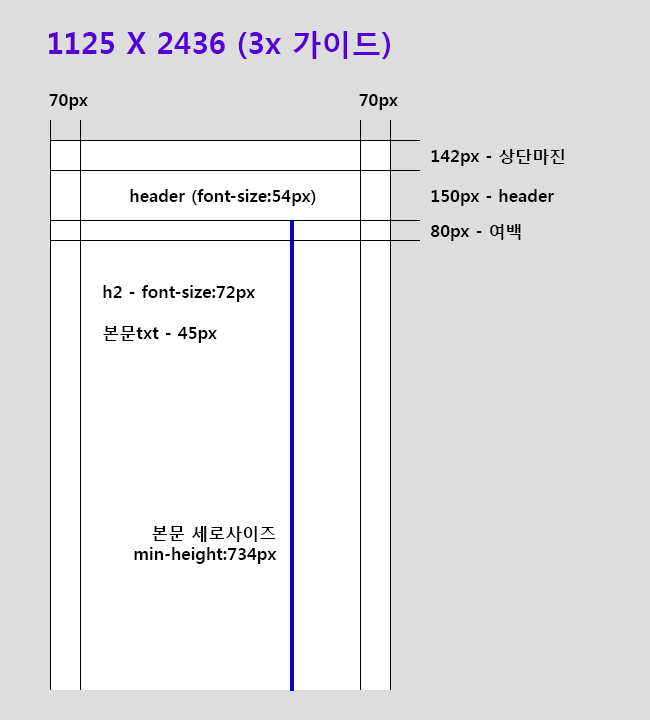
<style>
.page{position:relative;width:650px;height:720px;background:#dddddd}
.page>*{position:absolute;margin:0}
.t1{font:30px "MalgunGothicBold";color:#5500d5}
.t2{font:17px "MalgunGothicBold";color:#000000}
</style>
<div class="page">
<p class="t1" style="left:49px;top:31px;width:341px;height:28px">1125 X 2436 (3x 가이드)</p>
<p class="t2" style="left:49px;top:94px;width:39px;height:16px">70px</p>
<p class="t2" style="left:359px;top:94px;width:39px;height:16px">70px</p>
<p class="t2" style="left:431px;top:149px;width:133px;height:17px">142px - 상단마진</p>
<p class="t2" style="left:130px;top:189px;width:186px;height:17px">header (font-size:54px)</p>
<p class="t2" style="left:431px;top:189px;width:123px;height:17px">150px - header</p>
<p class="t2" style="left:431px;top:224px;width:90px;height:17px">80px - 여백</p>
<p class="t2" style="left:103px;top:285px;width:153px;height:58px">h2 - font-size:72px<br><br>본문txt - 45px</p>
<p class="t2" style="left:134px;top:526px;width:143px;height:38px;text-align:right">본문 세로사이즈<br>min-height:734px</p>
</div>
